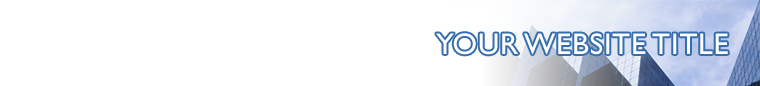
<style>
.page{position:relative;width:760px;height:86px;background:#ffffff}
.page>*{position:absolute;margin:0}
.t1{font:30px "GillSans";letter-spacing:0.025em;color:#ffffff;text-transform:uppercase}
</style>
<div class="page">
<p class="t1" style="left:436px;top:33px;width:292px;height:22px">your website title</p>
</div>
